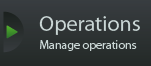
<style>
.page{position:relative;width:151px;height:66px}
.page>*{position:absolute;margin:0}
.t1{font:22px "MyriadPro-Regular";color:#cad6d5}
.t2{font:12px "MyriadPro-Regular";color:#cad6d5}
</style>
<div class="page">
<p class="t1" style="left:39px;top:16px;width:101px;height:19px">Operations</p>
<p class="t2" style="left:40px;top:40px;width:97px;height:11px">Manage operations</p>
</div>
